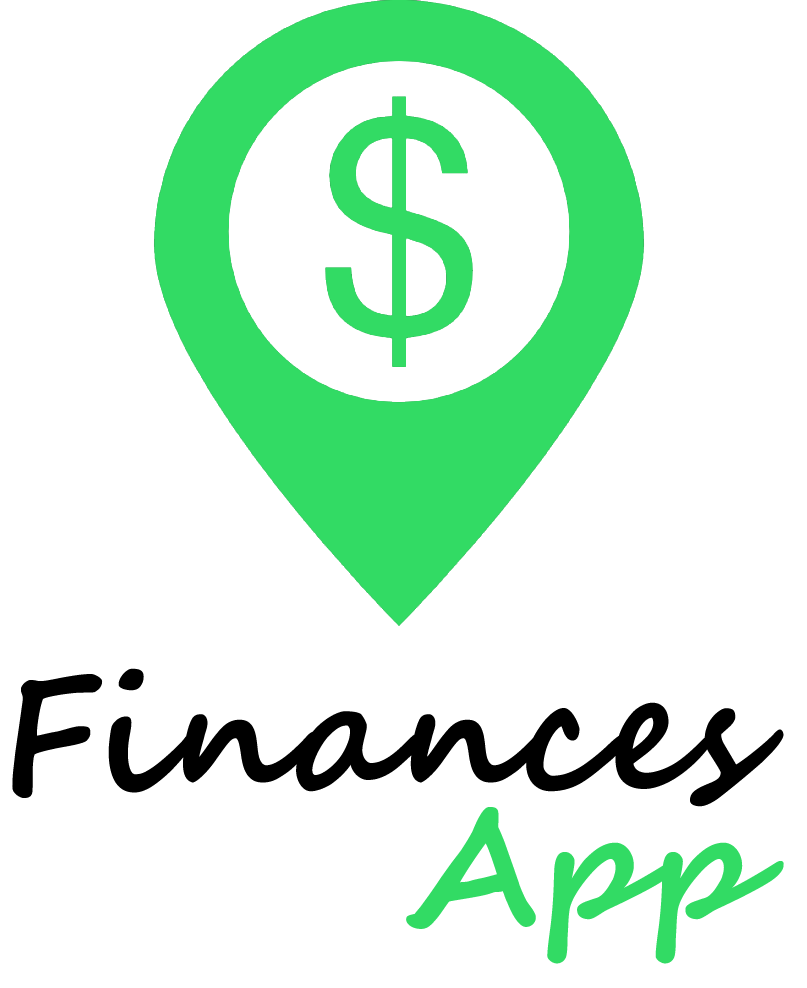
<style>
.page{position:relative;width:807px;height:988px;background:#ffffff}
.page>*{position:absolute;margin:0}
.t1{font:160px "SegoeScript-Bold";letter-spacing:0.005em;color:#000000}
.t2{font:160px "SegoeScript-Bold";letter-spacing:0.005em;color:#32db64}
</style>
<div class="page">
<p class="t1" style="left:12px;top:668px;width:772px;height:139px">Finances</p>
<p class="t2" style="left:406px;top:807px;width:378px;height:157px">App</p>
</div>
